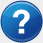
<style>
.page{position:relative;width:43px;height:43px}
.page>*{position:absolute;margin:0}
.t1{font:41.8px "Tunga-Bold";letter-spacing:0.13em;color:#ffffff;font-variant:small-caps}
</style>
<div class="page">
<p class="t1" style="left:13px;top:9px;width:17px;height:25px">?</p>
</div>
